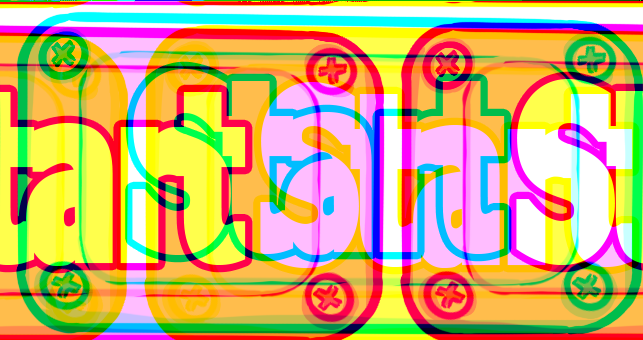
<style>
.page{position:relative;width:643px;height:340px}
.page>*{position:absolute;margin:0}
.t1{font:248.4px "Fava-Black";letter-spacing:-0.04em;scale:0.66 1}
</style>
<div class="page">
<p class="t1" style="left:129px;top:68px;width:373px;height:186px">Start</p>
</div>
